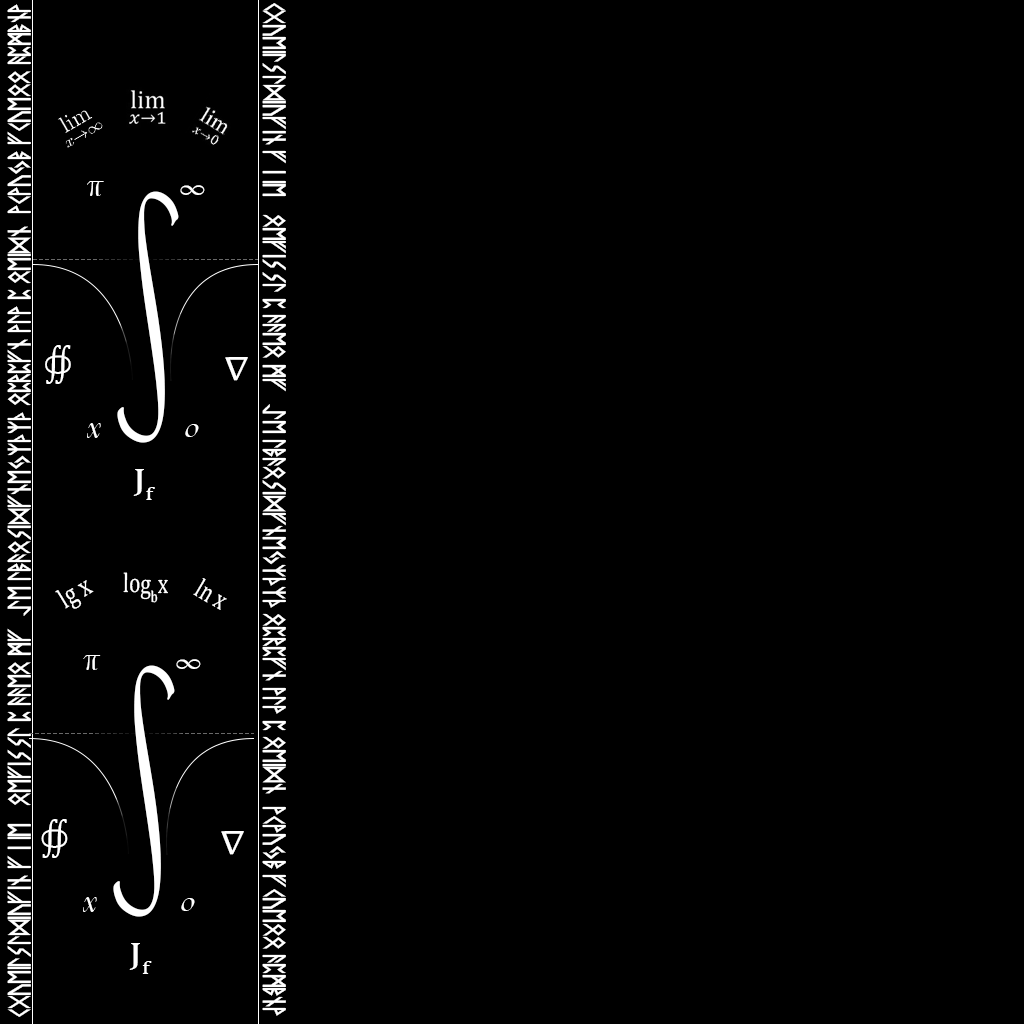
<style>
.page{position:relative;width:1024px;height:1024px;background:#000000}
.page>*{position:absolute;margin:0}
.t1{font:28.9px "floki";color:#ffffff;scale:0.81 1}
.t2{font:32.4px "CaslonBeckerNo540SwashRus-Italic";color:#ffffff;scale:0.91 1}
.t3{font:28.7px "CaslonBeckerNo540SwashRus-Italic";color:#ffffff;scale:1.29 1}
.t4{font:176.6px "MiamaNueva";color:#ffffff;scale:0.7 1}
.t5{font:35.9px "CambriaMath";color:#ffffff;scale:0.86 1}
.t6{font:34.3px "CambriaMath";color:#ffffff;scale:1.21 1}
.t7{font:33.8px "CaslonBeckerNo540SwashRus-Italic";color:#ffffff}
.t8{font:29.7px "CaslonBeckerNo540SwashRus-Italic";color:#ffffff;scale:1.22 1}
.t9{font:31.1px "CambriaMath";color:#ffffff;scale:1.38 1}
.t10{font:28.5px "CambriaMath";color:#ffffff;scale:0.79 1}
.t11{font:27.8px "CambriaMath";color:#ffffff;scale:0.77 1}
.t12{font:27.6px "CambriaMath";color:#ffffff;scale:0.76 1}
</style>
<div class="page">
<p class="t1" style="left:7px;top:4px;width:24px;height:1013px;rotate:-90deg">kgueilsldiufin f i ie   oefissl p aaeo mf  ye lbaosidfnejzxzx oprpfn vlv p oeidn  vkvujb fkueoo apmbnv</p>
<p class="t1" style="left:262px;top:3px;width:24px;height:1013px;rotate:90deg">kgueilsldiufin f i ie   oefissl p aaeo mf  ye lbaosidfnejzxzx oprpfn vlv p oeidn  vkvujb fkueoo apmbnv</p>
<p class="t2" style="left:87px;top:181px;width:17px;height:15px">π</p>
<p class="t3" style="left:180px;top:185px;width:25px;height:10px;rotate:-1deg">∞</p>
<p class="t4" style="left:117px;top:191px;width:62px;height:252px;rotate:2deg">∫</p>
<p class="t5" style="left:45px;top:345px;width:26px;height:39px">∯</p>
<p class="t6" style="left:225px;top:357px;width:23px;height:24px;rotate:-1deg">∇</p>
<p class="t7" style="left:87px;top:423px;width:14px;height:15px">x</p>
<p class="t8" style="left:185px;top:424px;width:14px;height:13px">0</p>
<p class="t9" style="left:133px;top:469px;width:22px;height:31px">Jf</p>
<p class="t10" style="left:55px;top:580px;width:39px;height:29px;rotate:-31deg">lg x</p>
<p class="t11" style="left:123px;top:572px;width:45px;height:31px">logbx</p>
<p class="t12" style="left:193px;top:578px;width:34px;height:32px;rotate:30deg">ln x</p>
<p class="t2" style="left:83px;top:655px;width:18px;height:15px">π</p>
<p class="t4" style="left:113px;top:665px;width:62px;height:252px;rotate:2deg">∫</p>
<p class="t3" style="left:176px;top:659px;width:25px;height:10px;rotate:-1deg">∞</p>
<p class="t5" style="left:41px;top:819px;width:27px;height:39px">∯</p>
<p class="t6" style="left:221px;top:831px;width:23px;height:24px;rotate:-1deg">∇</p>
<p class="t7" style="left:83px;top:897px;width:14px;height:15px">x</p>
<p class="t8" style="left:181px;top:898px;width:14px;height:13px">0</p>
<p class="t9" style="left:129px;top:943px;width:23px;height:31px">Jf</p>
</div>
